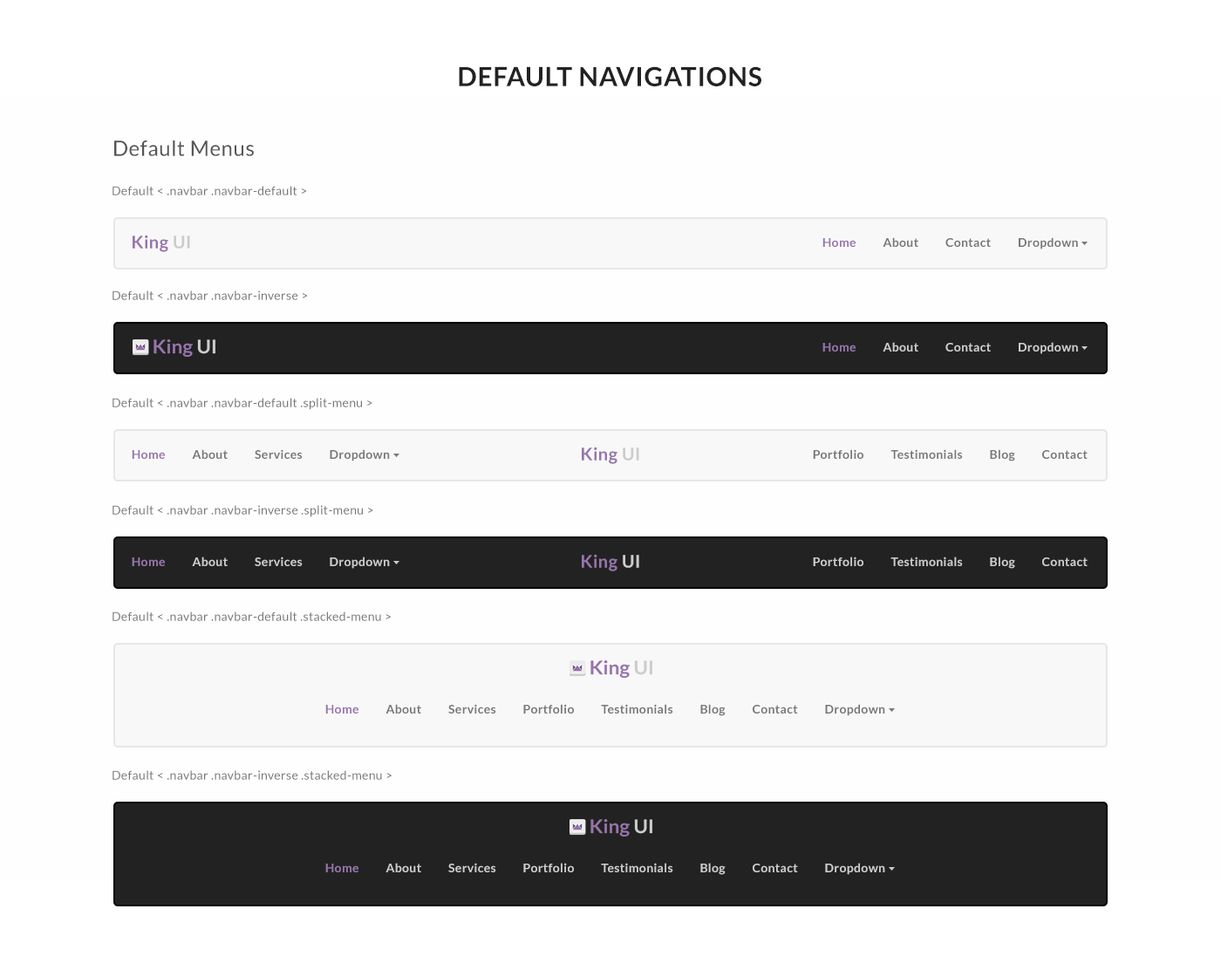
<style>
.page{position:relative;width:1221px;height:977px;background:#fefefe}
.page>*{position:absolute;margin:0}
.t1{font:26.2px "Lato-Bold";letter-spacing:0.025em;color:#222222}
.t2{font:20.9px "Lato-Regular";letter-spacing:0.025em;color:#555555}
.t3{font:12.2px "Lato-Regular";letter-spacing:0.025em;color:#777777}
.t4{font:17.4px "Lato-Bold";letter-spacing:0.025em;color:#9775ab}
.t5{font:17.4px "Lato-Bold";letter-spacing:0.025em;color:#cccccc}
.t6{font:12.2px "Lato-Bold";letter-spacing:0.025em;color:#777777}
.t7{font:12.2px "Lato-Bold";letter-spacing:0.025em;color:#9775ab}
.t8{font:12.2px "Lato-Bold";letter-spacing:0.025em;color:#cccccc}
</style>
<div class="page">
<p class="t1" style="left:459px;top:66px;width:302px;height:20px">DEFAULT NAVIGATIONS</p>
<p class="t2" style="left:114px;top:140px;width:140px;height:16px">Default Menus</p>
<p class="t3" style="left:112px;top:186px;width:195px;height:9px">Default &lt; .navbar .navbar-default &gt;</p>
<p class="t4" style="left:133px;top:235px;width:57px;height:17px">King <span class="t5">UI</span></p>
<p class="t6" style="left:822px;top:237px;width:256px;height:12px"><span class="t7">Home          </span>About          Contact          Dropdown</p>
<p class="t3" style="left:112px;top:290px;width:196px;height:10px">Default &lt; .navbar .navbar-inverse &gt;</p>
<p class="t8" style="left:822px;top:342px;width:256px;height:12px"><span class="t7">Home          </span>About          Contact          Dropdown</p>
<p class="t3" style="left:112px;top:398px;width:260px;height:12px">Default &lt; .navbar .navbar-default .split-menu &gt;</p>
<p class="t6" style="left:132px;top:449px;width:258px;height:12px"><span class="t7">Home          </span>About          Services          Dropdown</p>
<p class="t4" style="left:582px;top:446px;width:57px;height:18px">King <span class="t5">UI</span></p>
<p class="t6" style="left:813px;top:449px;width:274px;height:12px">Portfolio          Testimonials          Blog          Contact</p>
<p class="t3" style="left:112px;top:505px;width:261px;height:12px">Default &lt; .navbar .navbar-inverse .split-menu &gt;</p>
<p class="t8" style="left:132px;top:556px;width:258px;height:13px"><span class="t7">Home          </span>About          Services          Dropdown</p>
<p class="t4" style="left:582px;top:554px;width:57px;height:17px">King <span class="t5">UI</span></p>
<p class="t8" style="left:813px;top:556px;width:274px;height:13px">Portfolio          Testimonials          Blog          Contact</p>
<p class="t3" style="left:112px;top:611px;width:279px;height:10px">Default &lt; .navbar .navbar-default .stacked-menu &gt;</p>
<p class="t6" style="left:325px;top:704px;width:560px;height:12px"><span class="t7">Home          </span>About          Services          Portfolio          Testimonials          Blog          Contact          Dropdown</p>
<p class="t3" style="left:112px;top:770px;width:280px;height:10px">Default &lt; .navbar .navbar-inverse .stacked-menu &gt;</p>
<p class="t8" style="left:325px;top:862px;width:560px;height:13px"><span class="t7">Home          </span>About          Services          Portfolio          Testimonials          Blog          Contact          Dropdown</p>
</div>
